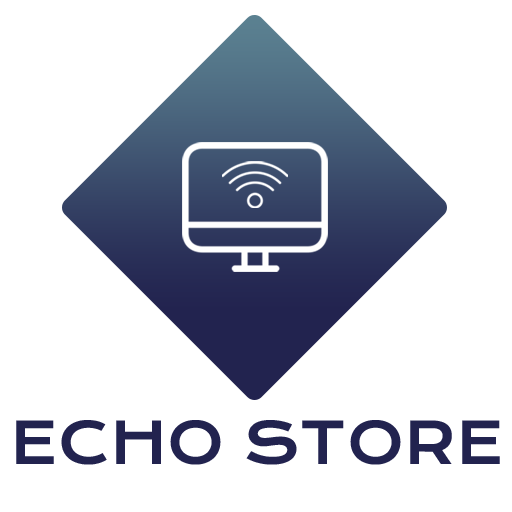
<style>
.page{position:relative;width:512px;height:512px;background:#ffffff}
.page>*{position:absolute;margin:0}
.t1{font:56.9px "KronaOne-Regular";color:#22234f}
</style>
<div class="page">
<p class="t1" style="left:16px;top:420px;width:484px;height:45px">ECHO STORE</p>
</div>
